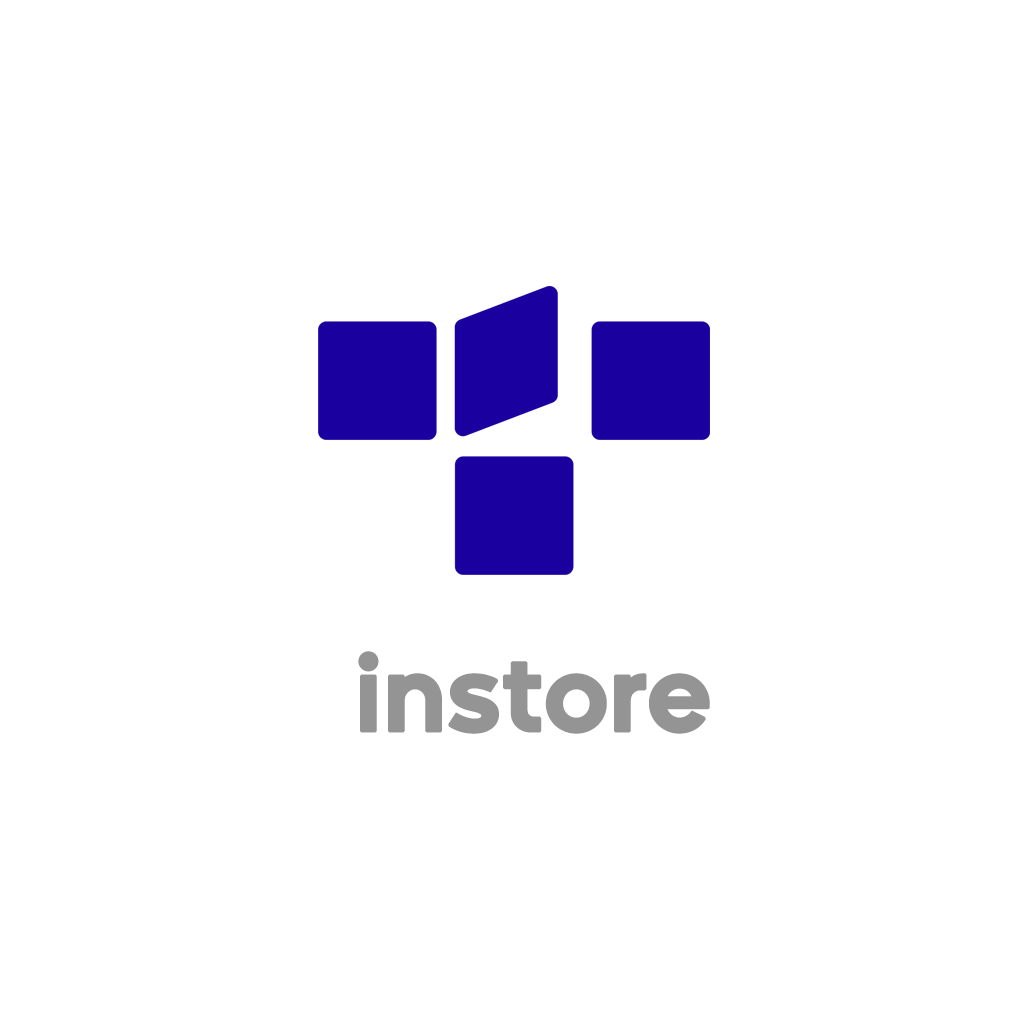
<style>
.page{position:relative;width:1024px;height:1024px;background:#ffffff}
.page>*{position:absolute;margin:0}
.t1{font:110px "and-black";color:#949494;font-weight:bold}
</style>
<div class="page">
<p class="t1" style="left:358px;top:651px;width:352px;height:83px">instore</p>
</div>
